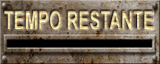
<style>
.page{position:relative;width:160px;height:64px}
.page>*{position:absolute;margin:0}
.t1{font:25.3px "Arial-BoldMT";letter-spacing:0.02em;text-transform:uppercase;scale:0.63 1}
</style>
<div class="page">
<p class="t1" style="left:4px;top:10px;width:150px;height:20px">TEMPO RESTANTE</p>
</div>
